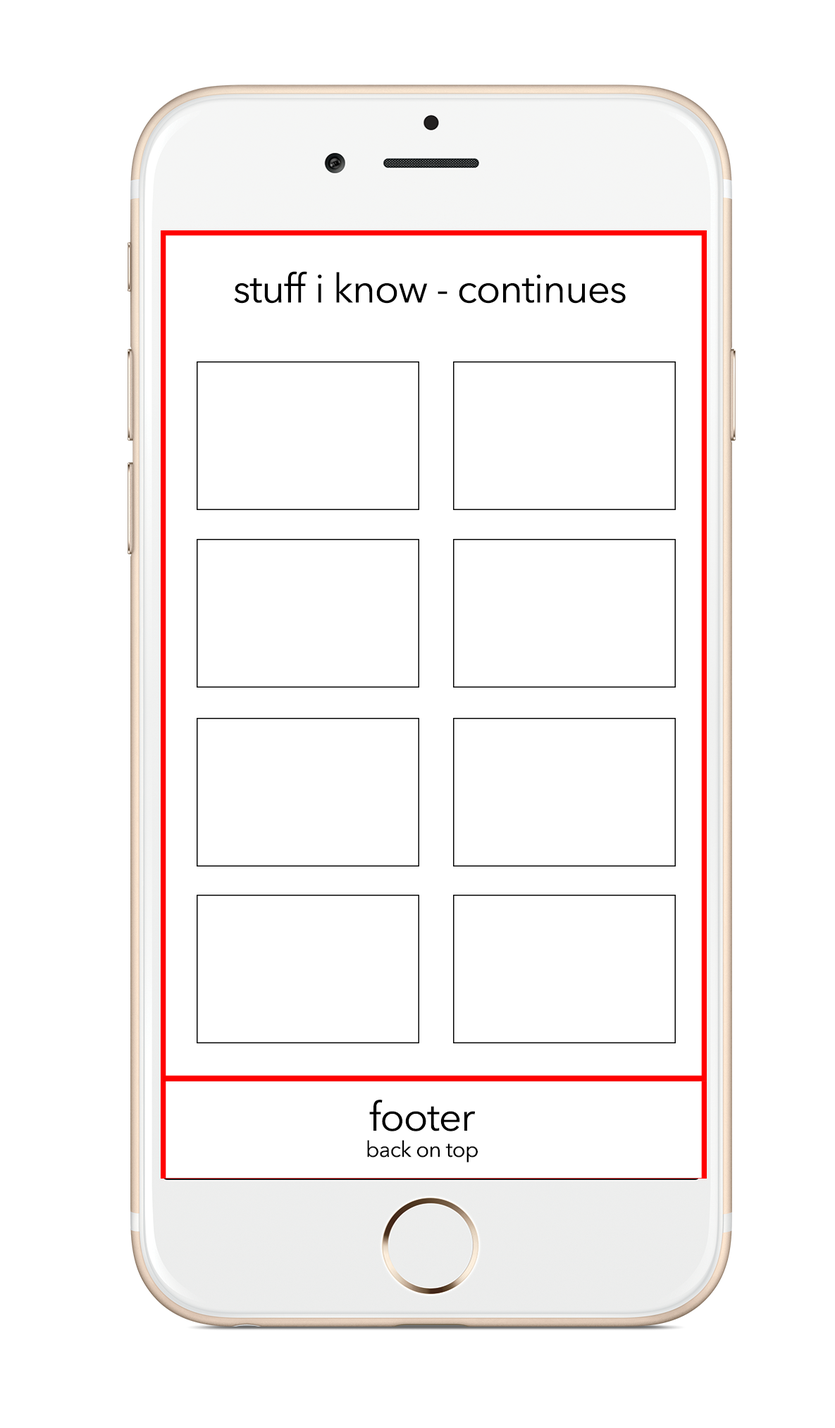
<style>
.page{position:relative;width:835px;height:1428px;background:#ffffff}
.page>*{position:absolute;margin:0}
.t1{font:40.2px "AvenirNext-Regular";letter-spacing:-0.025em;color:#000000}
.t2{font:21.8px "AvenirNext-Regular";letter-spacing:-0.025em;color:#000000}
</style>
<div class="page">
<p class="t1" style="left:234px;top:271px;width:392px;height:33px">stuff i know - continues</p>
<p class="t2" style="left:367px;top:1100px;width:111px;height:63px;text-align:center"><span class="t1">footer<br></span>back on top</p>
</div>
